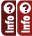
<style>
.page{position:relative;width:32px;height:36px;background:#ffffff}
.page>*{position:absolute;margin:0}
.t1{font:12.5px "MyriadPro-BoldCond";color:#ffffff}
</style>
<div class="page">
<p class="t1" style="left:4px;top:15px;width:10px;height:18px;rotate:-90deg">Info</p>
<p class="t1" style="left:20px;top:15px;width:10px;height:18px;rotate:-90deg">Info</p>
</div>
